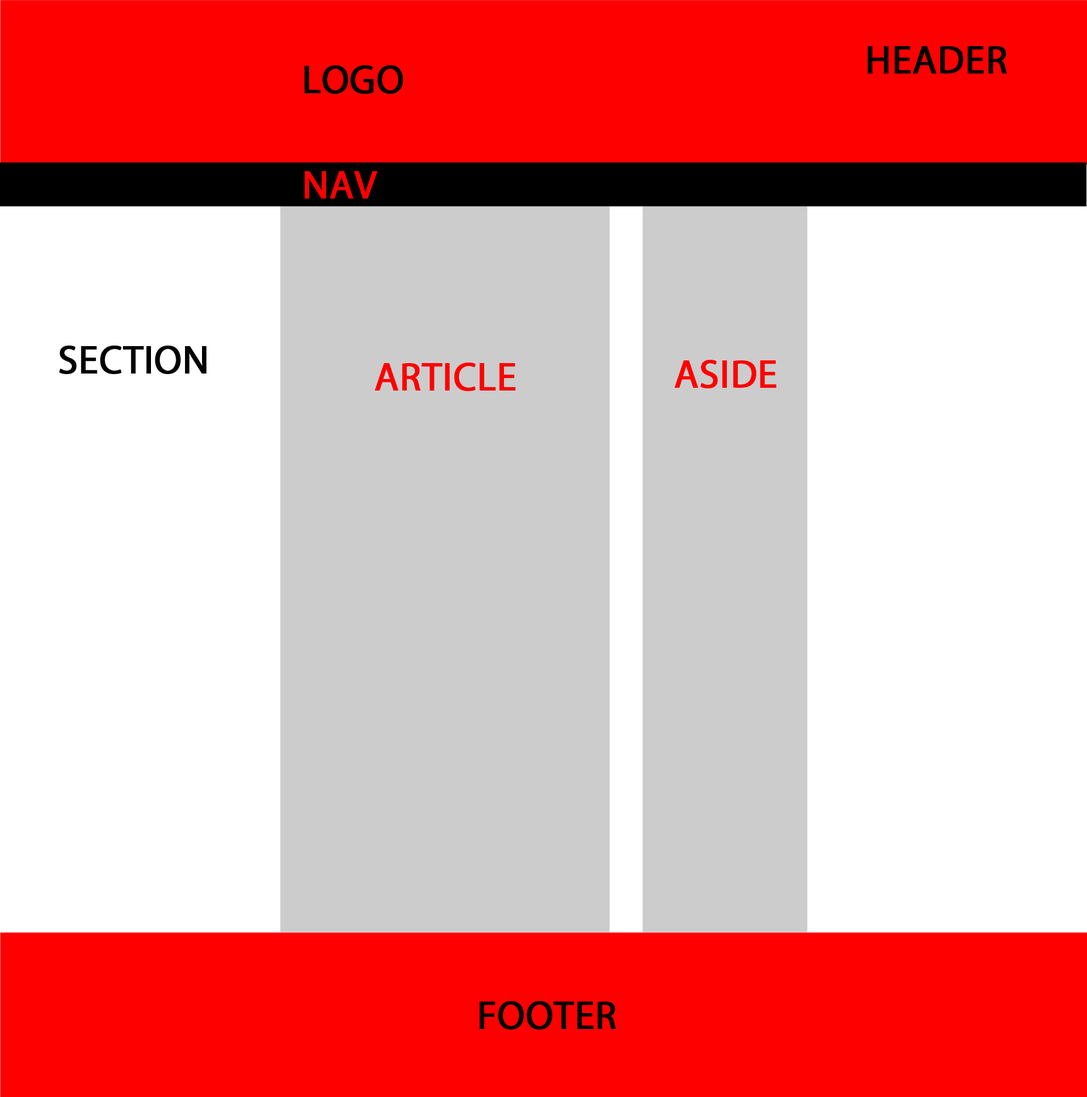
<style>
.page{position:relative;width:1087px;height:1097px;background:#ffffff}
.page>*{position:absolute;margin:0}
.t1{font:39.5px "MyriadPro-Regular";color:#000000;font-weight:bold}
.t2{font:39.5px "MyriadPro-Regular";color:#ff0000;font-weight:bold}
</style>
<div class="page">
<p class="t1" style="left:867px;top:46px;width:139px;height:28px">HEADER</p>
<p class="t1" style="left:304px;top:65px;width:99px;height:29px">LOGO</p>
<p class="t2" style="left:305px;top:171px;width:73px;height:28px">NAV</p>
<p class="t1" style="left:59px;top:346px;width:147px;height:28px">SECTION</p>
<p class="t2" style="left:375px;top:363px;width:140px;height:28px">ARTICLE</p>
<p class="t2" style="left:674px;top:360px;width:102px;height:29px">ASIDE</p>
<p class="t1" style="left:479px;top:1001px;width:137px;height:29px">FOOTER</p>
</div>
